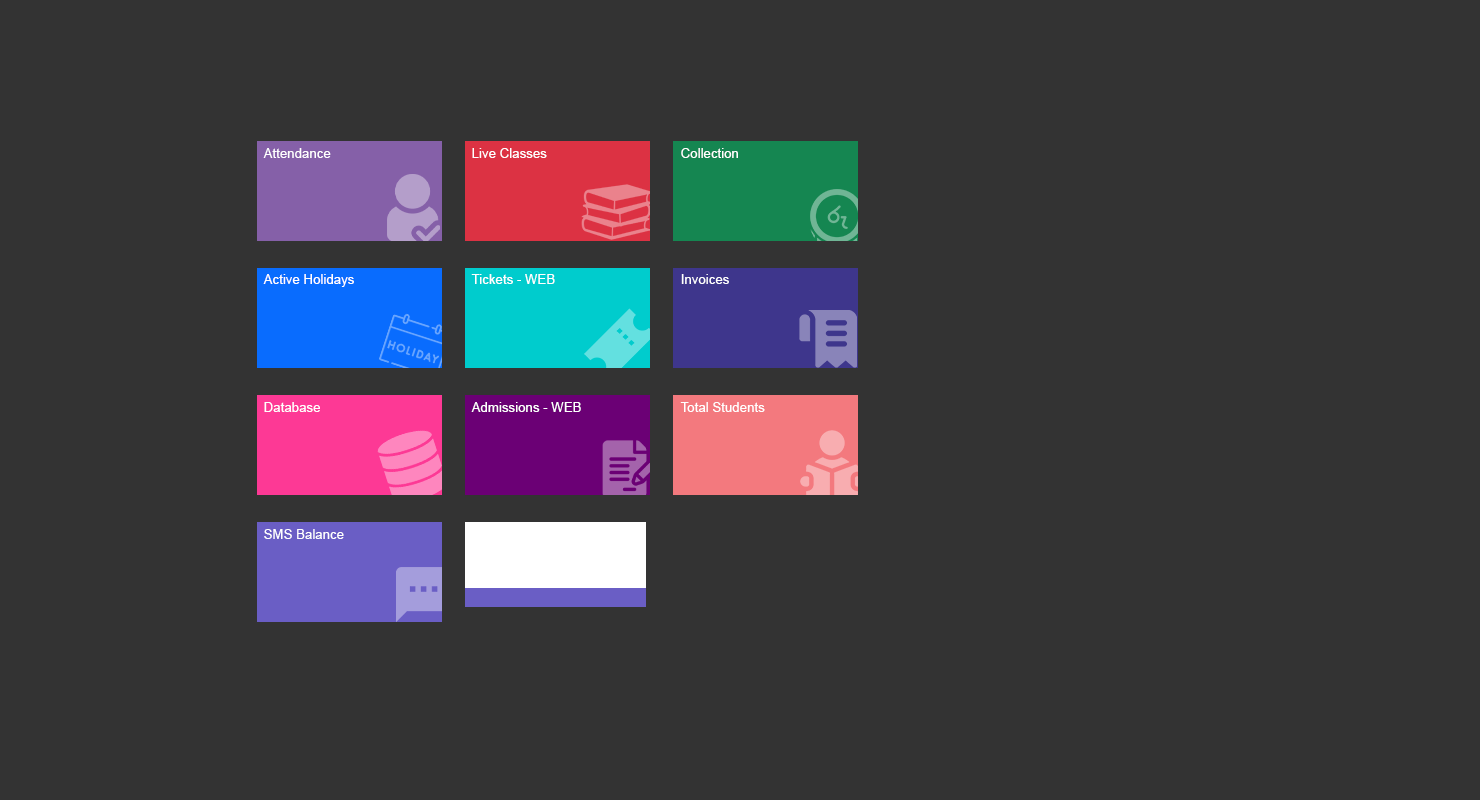
<style>
.page{position:relative;width:1480px;height:800px;background:#333333}
.page>*{position:absolute;margin:0}
.t1{font:13.3px "ArialMT";color:#ffffff}
</style>
<div class="page">
<p class="t1" style="left:263px;top:148px;width:68px;height:10px">Attendance</p>
<p class="t1" style="left:472px;top:148px;width:75px;height:10px">Live Classes</p>
<p class="t1" style="left:681px;top:148px;width:57px;height:10px">Collection</p>
<p class="t1" style="left:263px;top:274px;width:91px;height:13px">Active Holidays</p>
<p class="t1" style="left:471px;top:274px;width:84px;height:10px">Tickets - WEB</p>
<p class="t1" style="left:681px;top:274px;width:48px;height:10px">Invoices</p>
<p class="t1" style="left:264px;top:402px;width:56px;height:10px">Database</p>
<p class="t1" style="left:471px;top:402px;width:110px;height:10px">Admissions - WEB</p>
<p class="t1" style="left:680px;top:402px;width:85px;height:10px">Total Students</p>
<p class="t1" style="left:264px;top:529px;width:80px;height:10px">SMS Balance</p>
</div>
